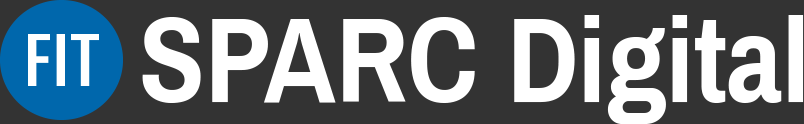
<style>
.page{position:relative;width:804px;height:124px;background:#333333}
.page>*{position:absolute;margin:0}
.t1{font:121px "ArchivoNarrow-Bold";color:#ffffff}
</style>
<div class="page">
<p class="t1" style="left:142px;top:15px;width:662px;height:109px">SPARC Digital</p>
</div>
